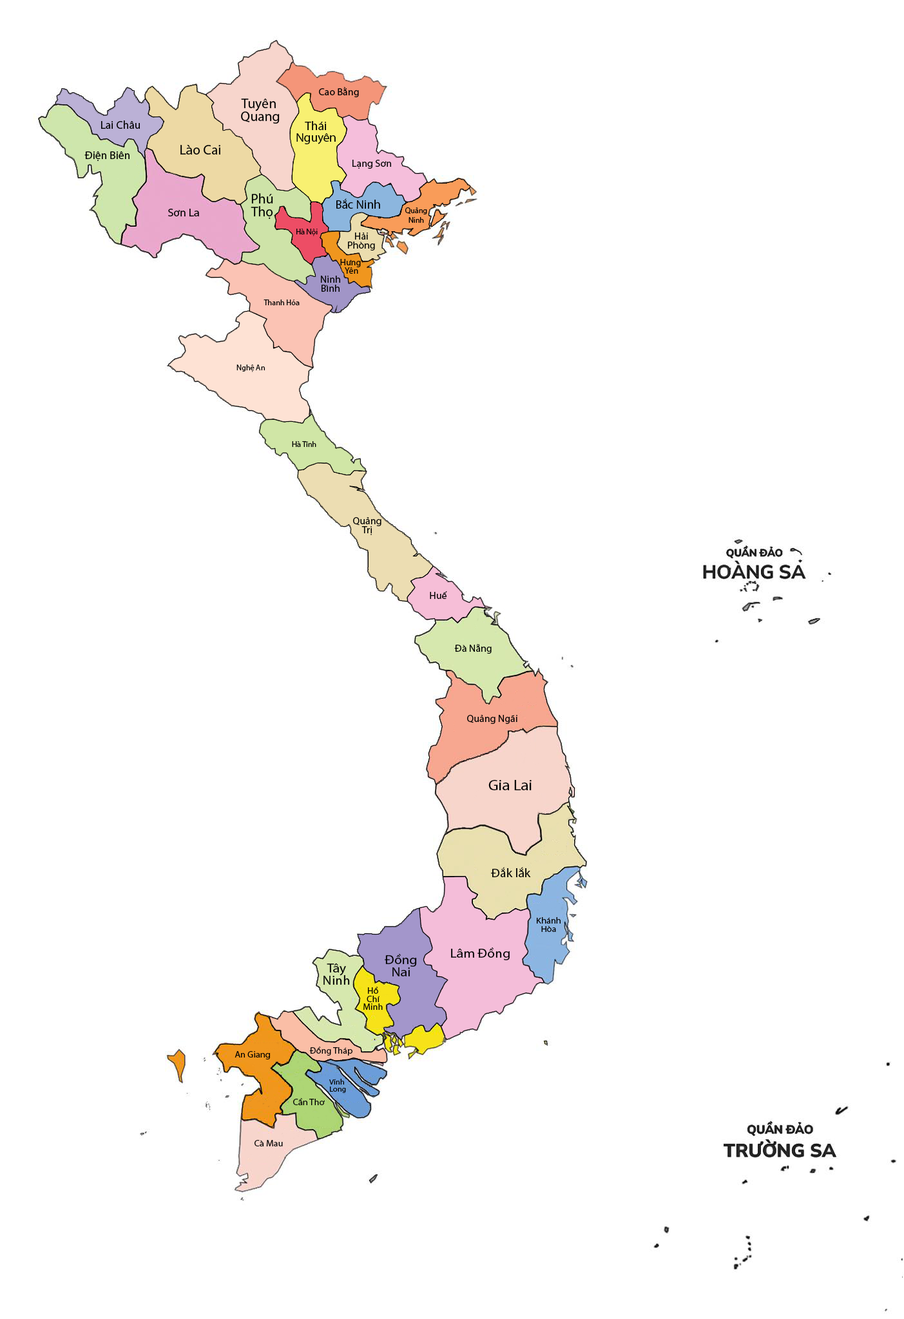
<style>
.page{position:relative;width:904px;height:1319px;background:#ffffff}
.page>*{position:absolute;margin:0}
.t1{font:10.3px "MyriadPro-Regular";color:#000000}
.t2{font:13.9px/12.9px "MyriadPro-Regular";color:#000000}
.t3{font:11.4px "MyriadPro-Regular";color:#000000}
.t4{font:12.3px/11.4px "MyriadPro-Regular";color:#000000}
.t5{font:13.9px "MyriadPro-Regular";color:#000000}
.t6{font:12.3px "MyriadPro-Regular";color:#000000}
.t7{font:7.8px/9.7px "MyriadPro-Regular";color:#000000}
.t8{font:7.9px "MyriadPro-Regular";color:#000000}
.t9{font:9.7px/9px "MyriadPro-Regular";color:#000000;scale:1.06 1}
.t10{font:9px/8.4px "MyriadPro-Regular";color:#000000}
.t11{font:9.7px "MyriadPro-Regular";color:#000000;scale:1.06 1}
.t12{font:15.2px "MyriadPro-Regular";color:#000000;scale:1.06 1}
.t13{font:12.2px "MyriadPro-Regular";color:#000000;scale:1.06 1}
.t14{font:8.7px/8px "MyriadPro-Regular";color:#000000;scale:1.06 1}
.t15{font:13.1px "MyriadPro-Regular";color:#000000;scale:1.06 1}
.t16{font:13.1px/12.1px "MyriadPro-Regular";color:#000000;scale:1.06 1}
.t17{font:8.8px/8.2px "MyriadPro-Regular";color:#000000;scale:1.06 1}
.t18{font:8.8px "MyriadPro-Regular";color:#000000;scale:1.06 1}
.t19{font:7.6px/7px "MyriadPro-Regular";color:#000000;scale:1.06 1}
</style>
<div class="page">
<p class="t1" style="left:319px;top:87px;width:40px;height:10px">Cao Bằng</p>
<p class="t2" style="left:241px;top:99px;width:39px;height:25px;text-align:center">Tuyên <br>Quang</p>
<p class="t3" style="left:101px;top:120px;width:39px;height:9px">Lai Châu</p>
<p class="t4" style="left:296px;top:121px;width:40px;height:23px;text-align:center">Thái<br>Nguyên</p>
<p class="t5" style="left:180px;top:145px;width:40px;height:10px">Lào Cai</p>
<p class="t3" style="left:84px;top:151px;width:45px;height:10px">Điện Biên</p>
<p class="t1" style="left:352px;top:160px;width:39px;height:9px">Lạng Sơn</p>
<p class="t2" style="left:251px;top:193px;width:22px;height:26px;text-align:center">Phú<br>Thọ</p>
<p class="t3" style="left:168px;top:209px;width:31px;height:7px">Sơn La</p>
<p class="t6" style="left:336px;top:198px;width:44px;height:11px">Bắc Ninh</p>
<p class="t7" style="left:405px;top:207px;width:22px;height:16px;text-align:center">Quảng<br>Ninh</p>
<p class="t8" style="left:296px;top:229px;width:22px;height:7px">Hà Nội</p>
<p class="t9" style="left:348px;top:233px;width:27px;height:18px;text-align:center">Hải<br>Phòng</p>
<p class="t10" style="left:340px;top:259px;width:21px;height:15px;text-align:center">Hưng <br>Yên</p>
<p class="t9" style="left:321px;top:276px;width:19px;height:16px;text-align:center">Ninh<br>Bình</p>
<p class="t8" style="left:263px;top:300px;width:37px;height:5px">Thanh Hóa</p>
<p class="t8" style="left:236px;top:365px;width:29px;height:7px">Nghệ An</p>
<p class="t8" style="left:292px;top:441px;width:24px;height:6px">Hà Tĩnh</p>
<p class="t9" style="left:353px;top:517px;width:28px;height:18px;text-align:center">Quảng<br>Trị</p>
<p class="t11" style="left:430px;top:591px;width:17px;height:8px">Huế</p>
<p class="t11" style="left:454px;top:644px;width:38px;height:10px">Đà Nẵng</p>
<p class="t11" style="left:467px;top:715px;width:50px;height:9px">Quảng Ngãi</p>
<p class="t12" style="left:488px;top:780px;width:43px;height:10px">Gia Lai</p>
<p class="t13" style="left:491px;top:867px;width:40px;height:10px">Đắk lắk</p>
<p class="t14" style="left:537px;top:917px;width:23px;height:15px;text-align:center">Khánh<br>Hòa</p>
<p class="t15" style="left:451px;top:948px;width:59px;height:13px">Lâm Đồng</p>
<p class="t16" style="left:323px;top:963px;width:27px;height:22px;text-align:center">Tây<br>Ninh</p>
<p class="t16" style="left:385px;top:954px;width:32px;height:23px;text-align:center">Đồng<br>Nai</p>
<p class="t17" style="left:363px;top:987px;width:20px;height:23px;text-align:center">Hồ<br>Chí<br>Minh</p>
<p class="t18" style="left:309px;top:1047px;width:43px;height:9px">Đồng Tháp</p>
<p class="t18" style="left:234px;top:1051px;width:36px;height:9px">An Giang</p>
<p class="t19" style="left:329px;top:1079px;width:17px;height:14px;text-align:center">Vĩnh <br>Long</p>
<p class="t18" style="left:293px;top:1098px;width:32px;height:7px">Cần Thơ</p>
<p class="t18" style="left:254px;top:1140px;width:29px;height:7px">Cà Mau</p>
</div>
